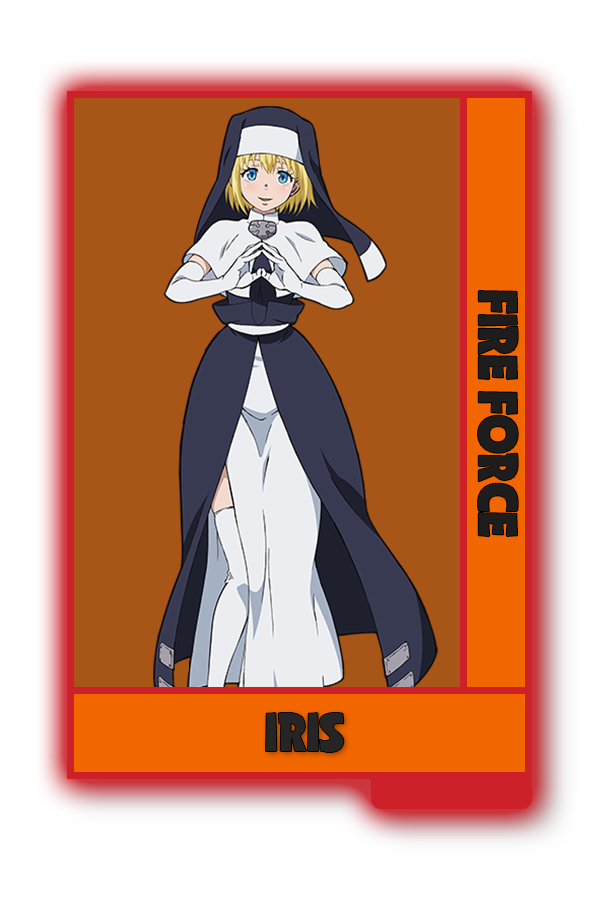
<style>
.page{position:relative;width:600px;height:900px;background:#a85518}
.page>*{position:absolute;margin:0}
.t1{font:69.6px "AristonComicDemo-Regular";color:#1d1d1d}
.t2{font:69.1px "AristonComicDemo-Regular";color:#252525}
</style>
<div class="page">
<p class="t1" style="left:478px;top:291px;width:40px;height:245px;rotate:90deg">FIRE FORCE</p>
<p class="t2" style="left:266px;top:713px;width:78px;height:39px">IRIS</p>
</div>
